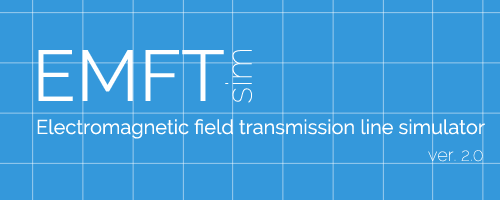
<style>
.page{position:relative;width:500px;height:200px;background:#3498db}
.page>*{position:absolute;margin:0}
.t1{font:72px "Raleway-Regular";color:#ffffff}
.t2{font:36px "Raleway-Thin";color:#ffffff}
.t3{font:20px "Raleway-Regular";color:#ffffff}
.t4{font:18px "Raleway-Thin";color:#ffffff}
</style>
<div class="page">
<p class="t1" style="left:38px;top:50px;width:186px;height:51px">EMFT</p>
<p class="t2" style="left:225px;top:50px;width:27px;height:53px;rotate:-90deg">sim</p>
<p class="t3" style="left:37px;top:119px;width:448px;height:20px">Electromagnetic field transmission line simulator</p>
<p class="t4" style="left:428px;top:150px;width:55px;height:12px">ver. 2.0</p>
</div>
